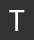
<style>
.page{position:relative;width:34px;height:40px;background:#333333}
.page>*{position:absolute;margin:0}
.t1{font:30px "MyriadPro-Regular";color:#ffffff}
</style>
<div class="page">
<p class="t1" style="left:9px;top:10px;width:16px;height:21px">T</p>
</div>
